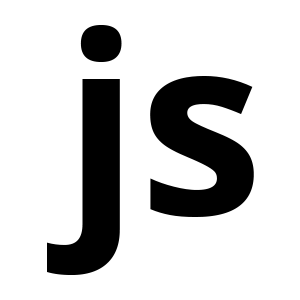
<style>
.page{position:relative;width:300px;height:300px;background:#ffffff}
.page>*{position:absolute;margin:0}
.t1{font:250px "OpenSans-Bold";color:#000000}
</style>
<div class="page">
<p class="t1" style="left:47px;top:25px;width:207px;height:250px">js</p>
</div>
